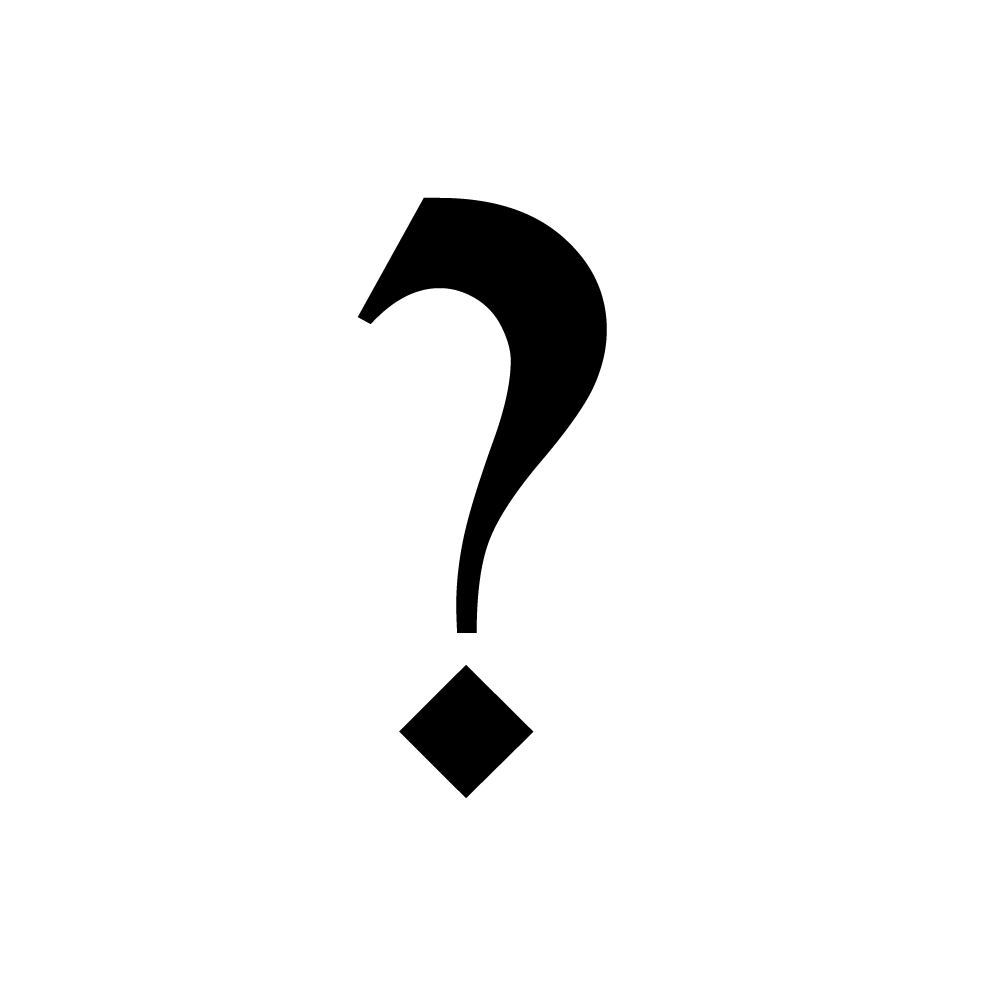
<style>
.page{position:relative;width:1000px;height:1000px;background:#ffffff}
.page>*{position:absolute;margin:0}
.t1{font:900px "OldEnglishTextMT";color:#000000}
</style>
<div class="page">
<p class="t1" style="left:357px;top:197px;width:250px;height:601px">?</p>
</div>
